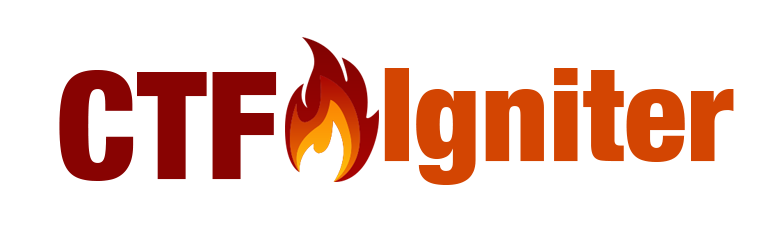
<style>
.page{position:relative;width:767px;height:243px;background:#ffffff}
.page>*{position:absolute;margin:0}
.t1{font:150px "HelveticaNeue-CondensedBlack";color:#880302}
.t2{font:130.5px "HelveticaNeue-CondensedBlack";color:#d34502}
</style>
<div class="page">
<p class="t1" style="left:59px;top:70px;width:218px;height:111px">CTF</p>
<p class="t2" style="left:384px;top:68px;width:350px;height:117px">Igniter</p>
</div>
